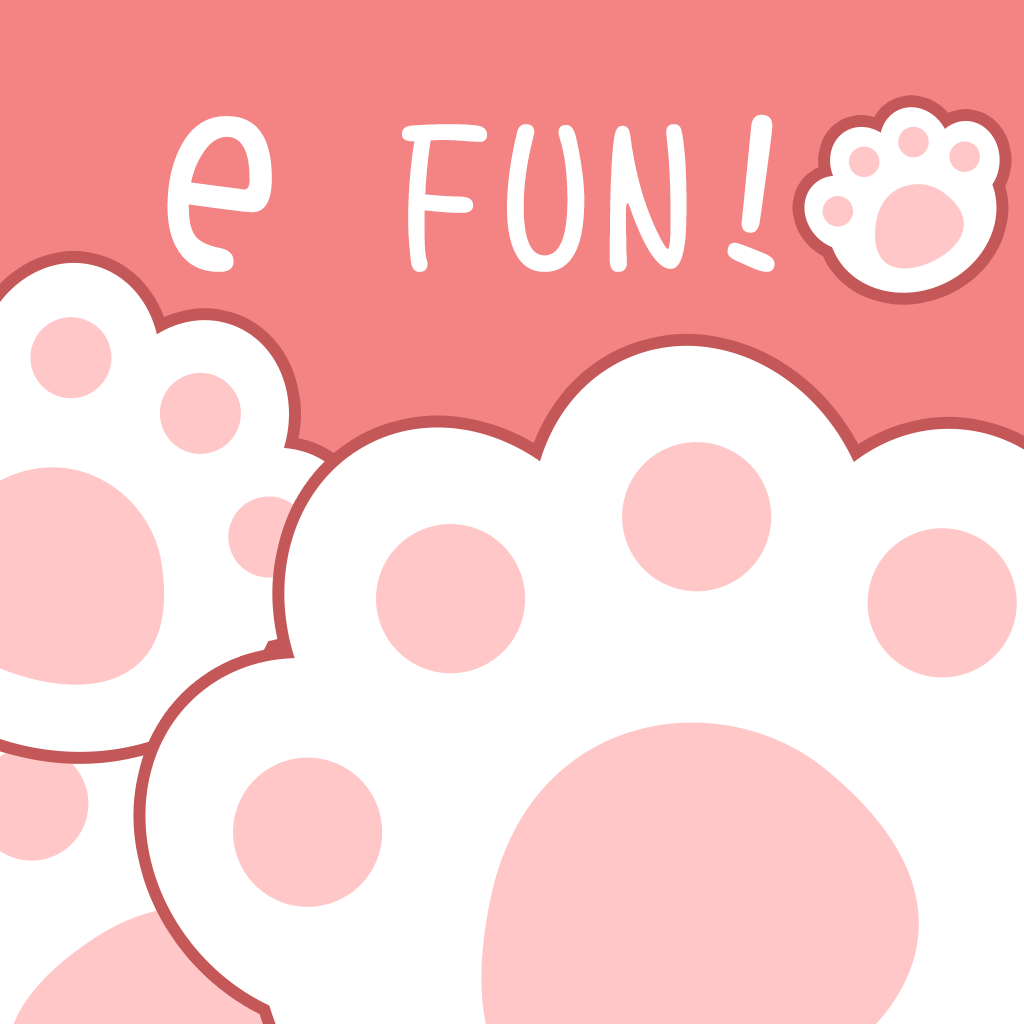
<style>
.page{position:relative;width:1024px;height:1024px;background:#ffffff}
.page>*{position:absolute;margin:0}
.t1{font:200px "DFShaoNvW5";color:#ffffff}
.t2{font:270px "DFShaoNvW5";color:#ffffff}
</style>
<div class="page">
<p class="t1" style="left:167px;top:114px;width:608px;height:158px"><span class="t2">e</span> FUN!</p>
</div>
